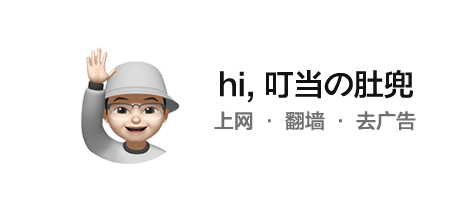
<style>
.page{position:relative;width:460px;height:200px;background:#ffffff}
.page>*{position:absolute;margin:0}
.t1{font:30px "FZLTZHK--GBK1-0";color:#121212}
.t2{font:20px "FZLTZHK--GBK1-0";color:#707070}
</style>
<div class="page">
<p class="t1" style="left:220px;top:70px;width:193px;height:33px">hi, 叮当の肚兜</p>
<p class="t2" style="left:214px;top:111px;width:202px;height:20px">上网 · 翻墙 · 去广告</p>
</div>
